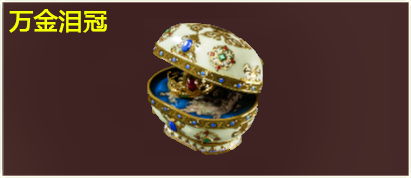
<style>
.page{position:relative;width:411px;height:178px}
.page>*{position:absolute;margin:0}
.t1{font:24px "MicrosoftYaHeiUI";color:#f4ff00;font-weight:bold}
</style>
<div class="page">
<p class="t1" style="left:9px;top:9px;width:98px;height:24px">万金泪冠</p>
</div>
